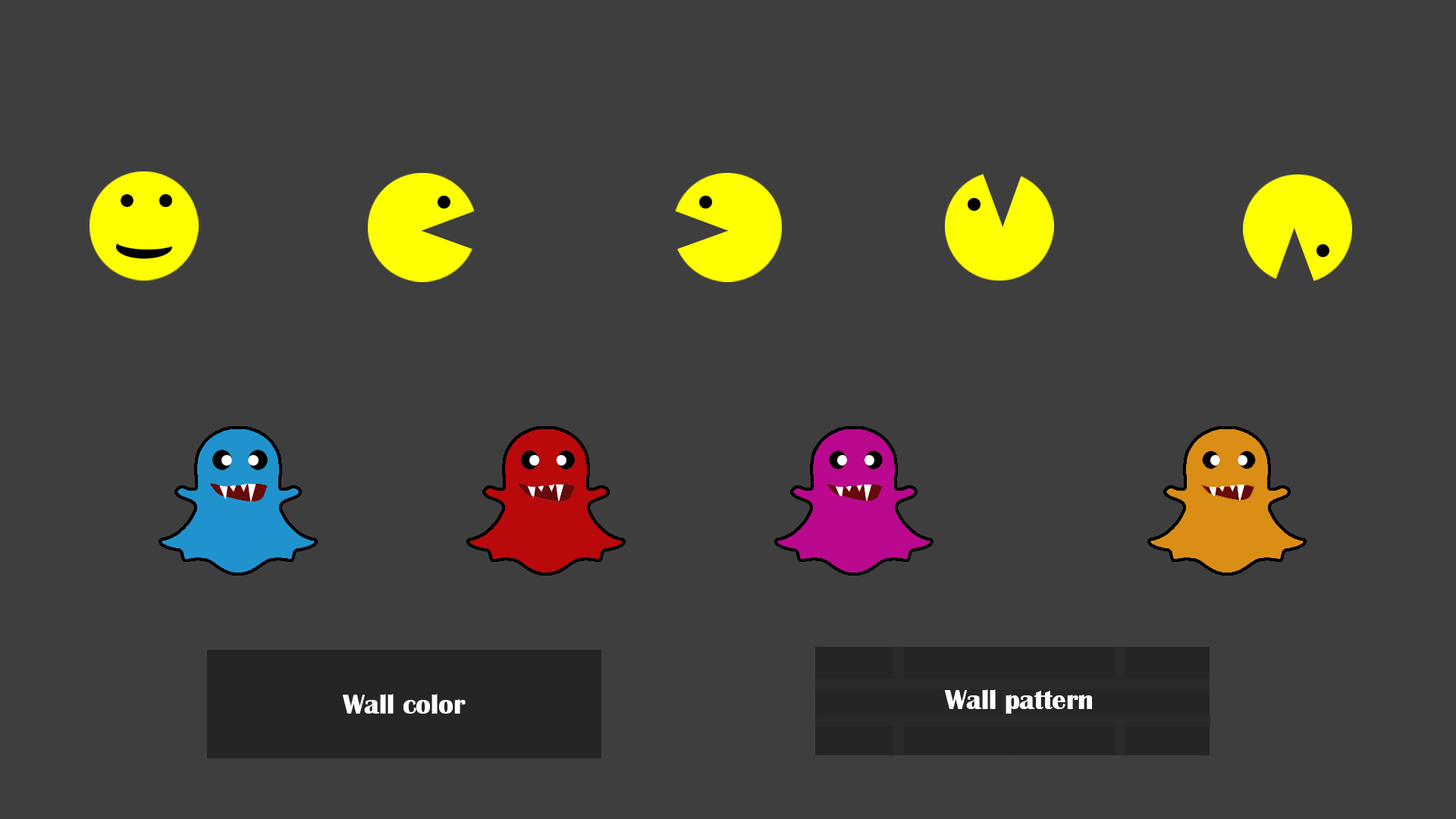
<style>
.page{position:relative;width:1456px;height:819px;background:#3e3e3e}
.page>*{position:absolute;margin:0}
.t1{font:27.7px "BritannicBold";color:#ffffff}
</style>
<div class="page">
<p class="t1" style="left:944px;top:689px;width:148px;height:25px">Wall pattern</p>
<p class="t1" style="left:342px;top:694px;width:124px;height:20px">Wall color</p>
</div>
